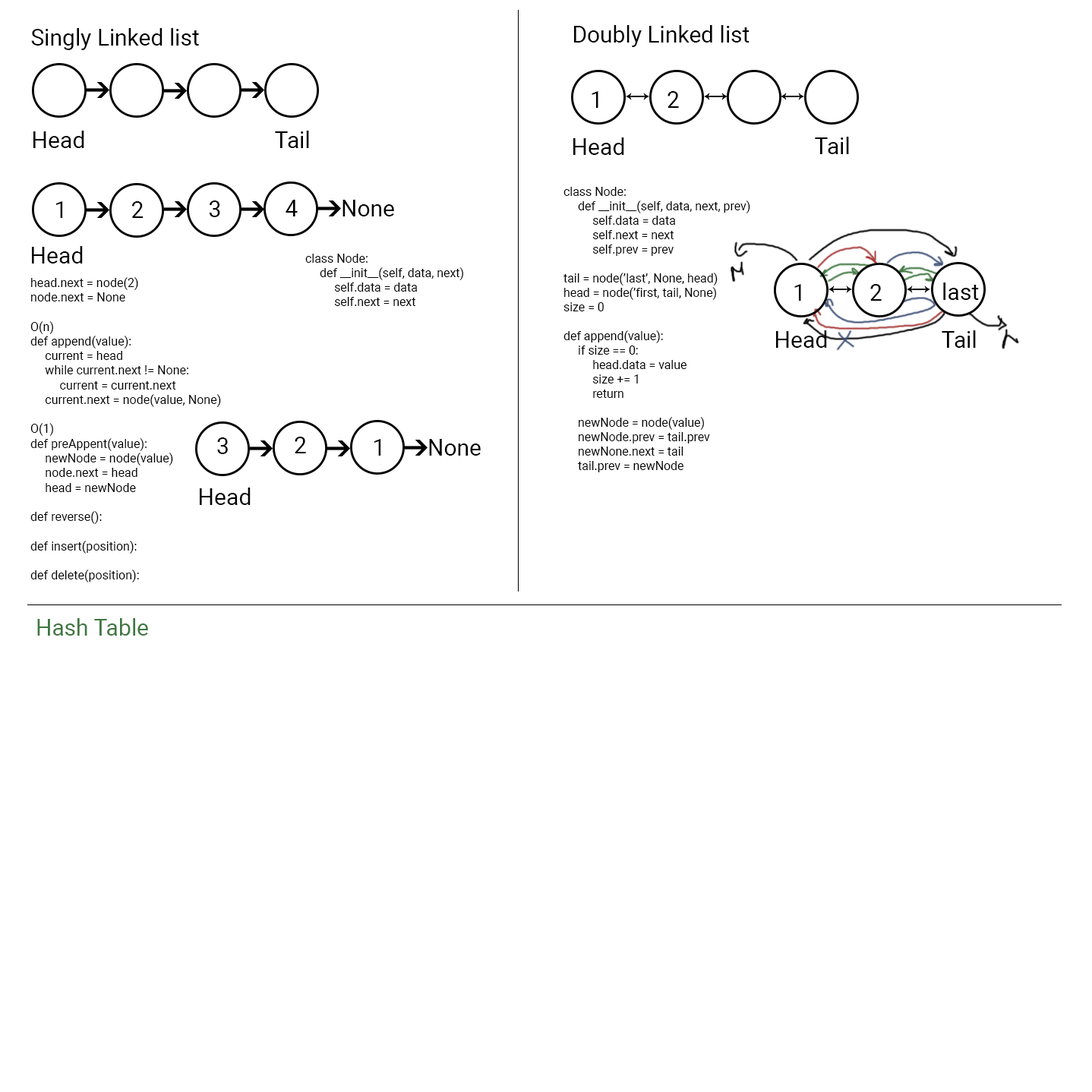
<style>
.page{position:relative;width:1092px;height:1092px;background:#ffffff}
.page>*{position:absolute;margin:0}
.t1{font:22.8px "Roboto-Regular";color:#000000}
.t2{font:12px "Roboto-Regular";color:#000000}
.t3{font:12.2px "Roboto-Regular";color:#000000}
.t4{font:22.8px "Roboto-Regular";color:#3f7740}
</style>
<div class="page">
<p class="t1" style="left:31px;top:28px;width:168px;height:22px">Singly Linked list</p>
<p class="t1" style="left:574px;top:25px;width:176px;height:22px">Doubly Linked list</p>
<p class="t1" style="left:592px;top:91px;width:6px;height:17px">1</p>
<p class="t1" style="left:667px;top:91px;width:12px;height:17px">2</p>
<p class="t1" style="left:33px;top:131px;width:51px;height:17px">Head</p>
<p class="t1" style="left:275px;top:131px;width:34px;height:17px">Tail</p>
<p class="t1" style="left:573px;top:137px;width:51px;height:18px">Head</p>
<p class="t1" style="left:815px;top:137px;width:34px;height:17px">Tail</p>
<p class="t2" style="left:563px;top:187px;width:187px;height:285px;text-align:justify">class Node:<br> def __init__(self, data, next, prev)<br>  self.data = data<br>  self.next = next<br>  self.prev = prev<br><br>tail = node(’last’, None, head)<br>head = node(’first, tail, None)<br>size = 0<br><br>def append(value):<br> if size == 0:<br>  head.data = value<br>  size += 1<br>  return<br><br> newNode = node(value)<br> newNode.prev = tail.prev<br> newNone.next = tail<br> tail.prev = newNode</p>
<p class="t1" style="left:56px;top:201px;width:7px;height:17px">1</p>
<p class="t1" style="left:131px;top:201px;width:13px;height:17px">2</p>
<p class="t1" style="left:209px;top:200px;width:11px;height:17px">3</p>
<p class="t1" style="left:286px;top:200px;width:12px;height:16px">4</p>
<p class="t1" style="left:342px;top:200px;width:52px;height:16px">None</p>
<p class="t1" style="left:32px;top:246px;width:51px;height:18px">Head</p>
<p class="t2" style="left:305px;top:254px;width:158px;height:52px;text-align:justify">class Node:<br> def __init__(self, data, next)<br>  self.data = data<br>  self.next = next</p>
<p class="t3" style="left:30px;top:277px;width:191px;height:305px;text-align:justify">head.next = node(2)<br>node.next = None<br><br>O(n)<br>def append(value):<br> current = head<br> while current.next != None:<br>  current = current.next<br> current.next = node(value, None)<br><br>O(1)<br>def preAppent(value): <br> newNode = node(value)<br> node.next = head<br> head = newNode<br><br>def reverse():<br><br>def insert(position):<br><br>def delete(position):</p>
<p class="t1" style="left:794px;top:284px;width:7px;height:17px">1</p>
<p class="t1" style="left:870px;top:284px;width:12px;height:17px">2</p>
<p class="t1" style="left:943px;top:282px;width:36px;height:18px">last</p>
<p class="t1" style="left:776px;top:330px;width:51px;height:18px">Head</p>
<p class="t1" style="left:942px;top:330px;width:34px;height:18px">Tail</p>
<p class="t1" style="left:217px;top:437px;width:11px;height:17px">3</p>
<p class="t1" style="left:295px;top:437px;width:11px;height:16px">2</p>
<p class="t1" style="left:374px;top:439px;width:7px;height:17px">1</p>
<p class="t1" style="left:429px;top:439px;width:52px;height:17px">None</p>
<p class="t1" style="left:200px;top:488px;width:51px;height:17px">Head</p>
<p class="t4" style="left:37px;top:618px;width:111px;height:18px">Hash Table</p>
</div>
